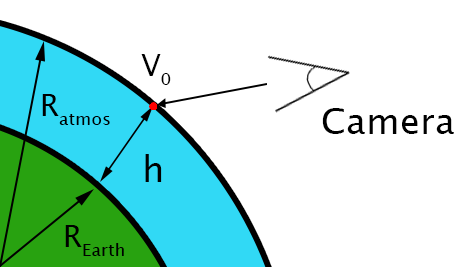
<style>
.page{position:relative;width:472px;height:267px;background:#ffffff}
.page>*{position:absolute;margin:0}
.t1{font:30px "LucidaSansUnicode";color:#000000}
</style>
<div class="page">
<p class="t1" style="left:141px;top:54px;width:30px;height:31px">V0</p>
<p class="t1" style="left:42px;top:94px;width:68px;height:31px">Ratmos</p>
<p class="t1" style="left:65px;top:225px;width:59px;height:31px">REarth</p>
</div>
